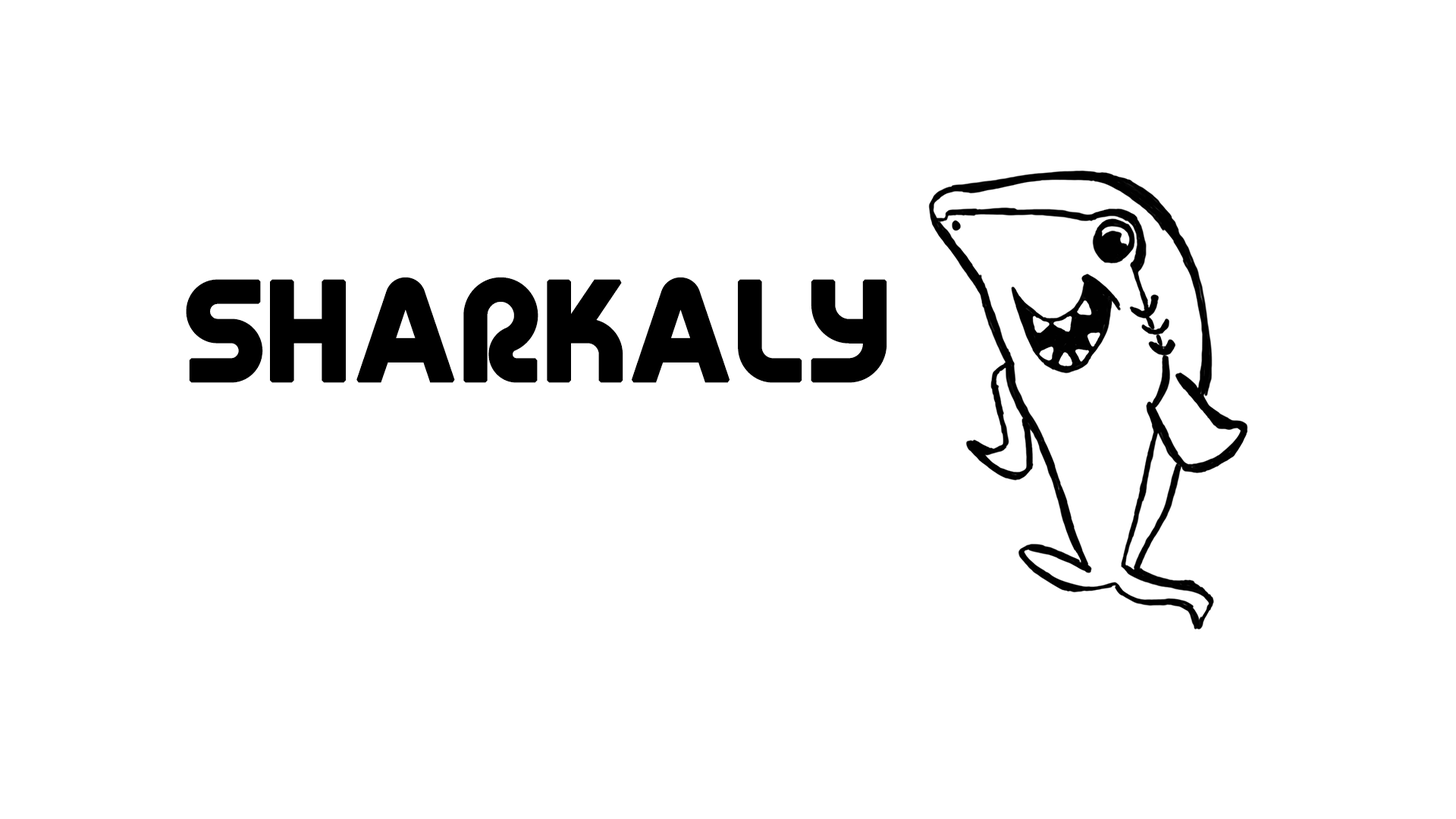
<style>
.page{position:relative;width:1456px;height:819px;background:#ffffff}
.page>*{position:absolute;margin:0}
.t1{font:154.8px "YagiUhfNo2";color:#000000;text-transform:uppercase;font-weight:bold}
</style>
<div class="page">
<p class="t1" style="left:186px;top:277px;width:701px;height:106px">Sharkaly</p>
</div>
